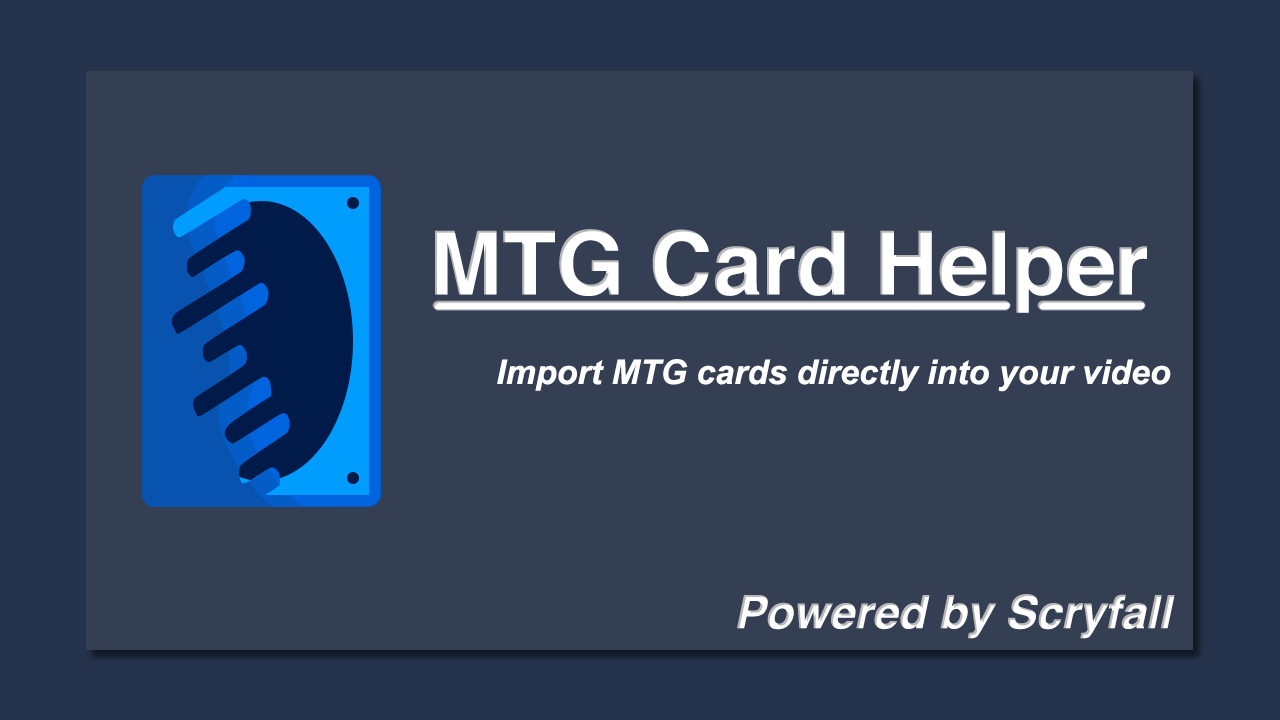
<style>
.page{position:relative;width:1280px;height:720px;background:#343f53}
.page>*{position:absolute;margin:0}
.t1{font:88.1px "Helvetica-Bold";color:#ffffff}
.t2{font:34px "Arial-BoldItalicMT";color:#ffffff}
.t3{font:46px "Helvetica-BoldOblique";color:#ffffff}
</style>
<div class="page">
<p class="t1" style="left:435px;top:229px;width:712px;height:84px">MTG Card Helper</p>
<p class="t2" style="left:497px;top:359px;width:674px;height:33px">Import MTG cards directly into your video</p>
<p class="t3" style="left:737px;top:594px;width:438px;height:45px">Powered by Scryfall</p>
</div>
